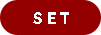
<style>
.page{position:relative;width:101px;height:35px;background:#940000}
.page>*{position:absolute;margin:0}
.t1{font:17.7px "WorkSansRoman-Bold";letter-spacing:0.3em;color:#ffffff;scale:0.82 1}
</style>
<div class="page">
<p class="t1" style="left:33px;top:12px;width:36px;height:12px">SET</p>
</div>
